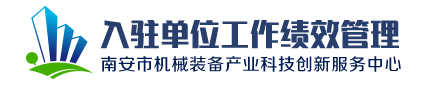
<style>
.page{position:relative;width:440px;height:90px;background:#ffffff}
.page>*{position:absolute;margin:0}
.t1{font:30px "RuixianSunHeiHeavyGB1.0";color:#283f6e}
.t2{font:17px "FZZZHUNHJW--GB1-0";letter-spacing:0.045em;color:#001b53}
</style>
<div class="page">
<p class="t1" style="left:100px;top:20px;width:299px;height:29px">入驻单位工作绩效管理</p>
<p class="t2" style="left:101px;top:56px;width:300px;height:16px">南安市机械装备产业科技创新服务中心</p>
</div>
